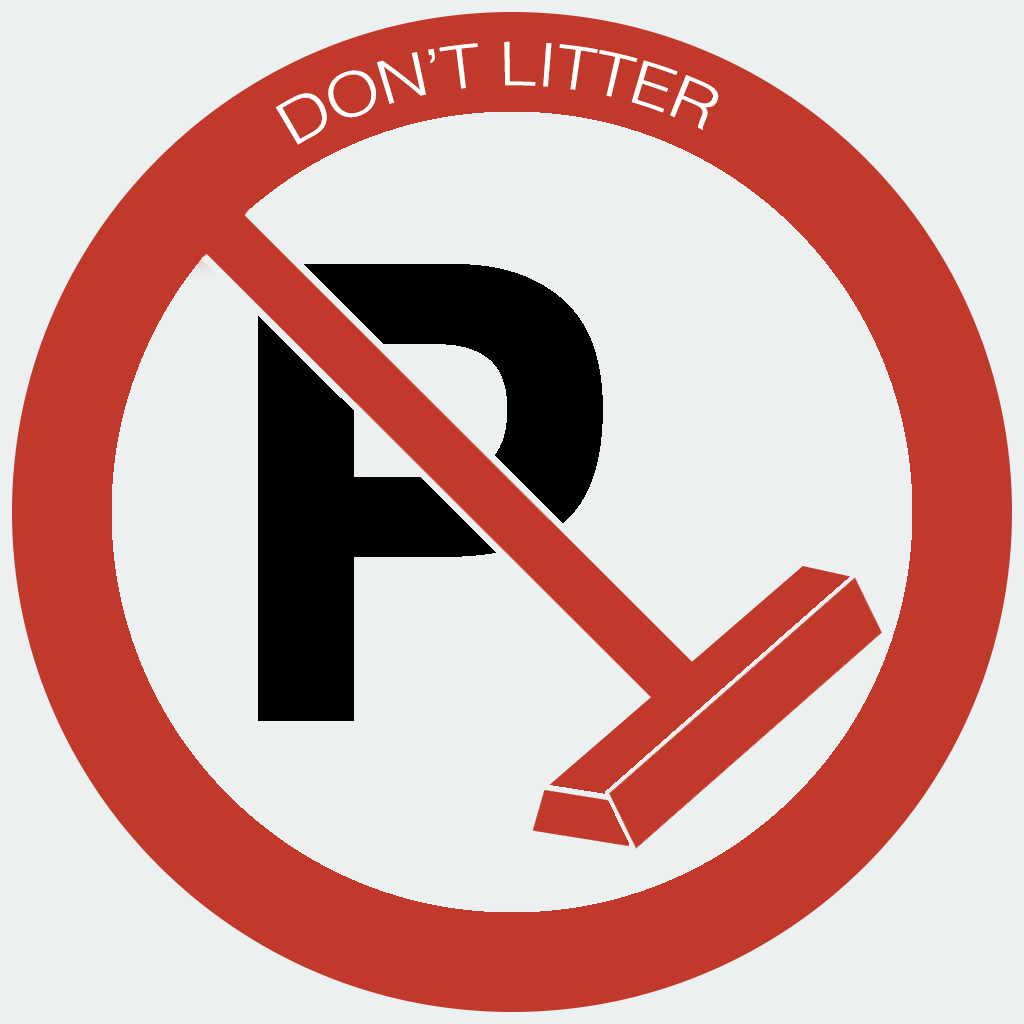
<style>
.page{position:relative;width:1024px;height:1024px;background:#ecf0f1}
.page>*{position:absolute;margin:0}
.t1{font:60px "Helvetica-Light";color:#ffffff}
</style>
<div class="page">
<p class="t1" style="left:275px;top:41px;width:444px;height:104px">DON’T LITTER</p>
</div>
